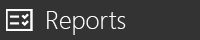
<style>
.page{position:relative;width:200px;height:40px;background:#333333}
.page>*{position:absolute;margin:0}
.t1{font:25px "SegoeUI-Light";color:#ffffff}
</style>
<div class="page">
<p class="t1" style="left:47px;top:11px;width:79px;height:24px">Reports</p>
</div>
